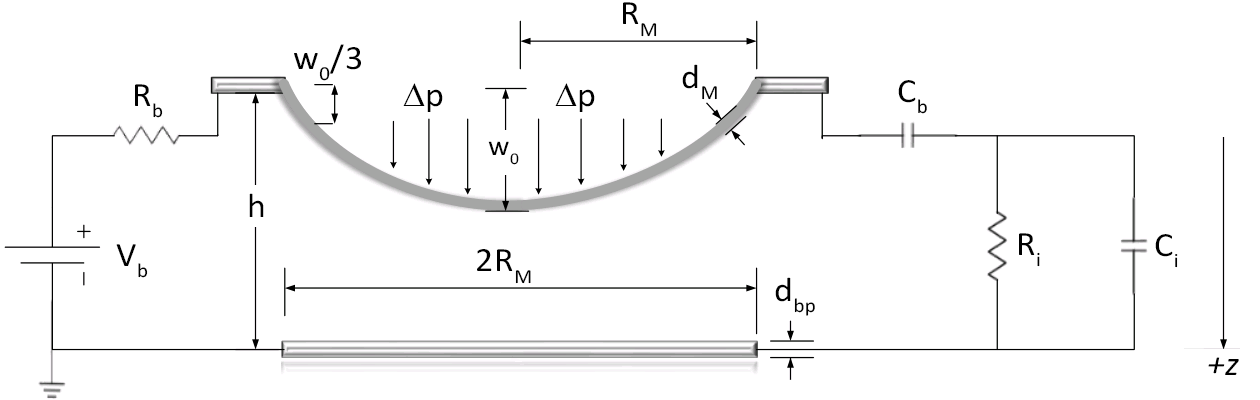
<style>
.page{position:relative;width:1260px;height:400px;background:#ffffff}
.page>*{position:absolute;margin:0}
.t1{font:34.2px "Calibri";letter-spacing:0.015em;color:#000000;scale:1.05 1}
.t2{font:28.5px "Calibri";letter-spacing:0.015em;color:#000000;scale:1.05 1}
.t3{font:34.2px "Calibri-Italic";letter-spacing:0.015em;color:#000000;scale:1.05 1}
</style>
<div class="page">
<p class="t1" style="left:623px;top:2px;width:34px;height:35px">RM</p>
<p class="t1" style="left:294px;top:44px;width:67px;height:37px">w0/3</p>
<p class="t1" style="left:682px;top:64px;width:35px;height:36px">dM</p>
<p class="t1" style="left:135px;top:84px;width:28px;height:34px">Rb</p>
<p class="t1" style="left:898px;top:80px;width:29px;height:34px">Cb</p>
<p class="t2" style="left:488px;top:141px;width:31px;height:24px">w0</p>
<p class="t1" style="left:249px;top:193px;width:15px;height:24px">h</p>
<p class="t1" style="left:1019px;top:233px;width:21px;height:34px">Ri</p>
<p class="t1" style="left:116px;top:244px;width:32px;height:34px">Vb</p>
<p class="t1" style="left:1155px;top:234px;width:23px;height:34px">Ci</p>
<p class="t1" style="left:477px;top:249px;width:54px;height:35px">2RM</p>
<p class="t1" style="left:775px;top:277px;width:40px;height:39px">dbp</p>
<p class="t3" style="left:1208px;top:357px;width:31px;height:18px">+z</p>
</div>
